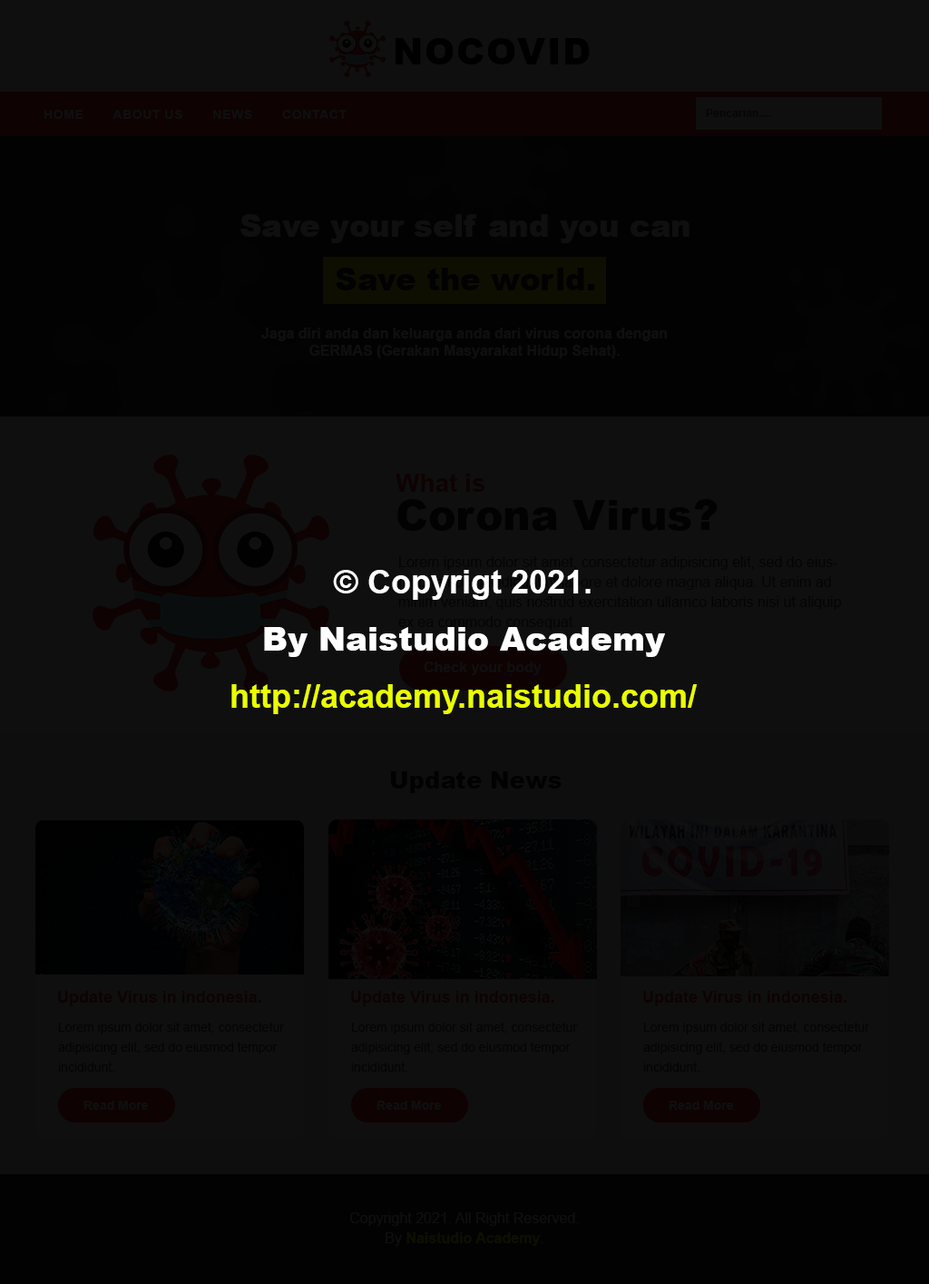
<style>
.page{position:relative;width:929px;height:1284px;background:#0f0f0f}
.page>*{position:absolute;margin:0}
.t1{font:36.3px "Arial-Black";letter-spacing:0.01em;color:#000000;text-transform:uppercase}
.t2{font:12.7px "Arial-BoldMT";letter-spacing:0.01em;color:#0f0f0f;text-transform:uppercase}
.t3{font:10.9px "Arial-BoldMT";letter-spacing:0.01em;color:#050505}
.t4{font:30.8px/53.5px "Arial-Black";color:#ffffff}
.t5{font:30.8px/53.5px "Arial-Black";color:#242424}
.t6{font:14.5px/17.2px "Arial-BoldMT";color:#0f0f0f}
.t7{font:41.7px/38.1px "Arial-Black";color:#020202}
.t8{font:25.4px/38.1px "Arial-BoldMT";color:#020202}
.t9{font:32.7px/57.2px "Arial-BoldMT";color:#eaff00}
.t10{font:32.7px/57.2px "Arial-BoldMT";color:#ffffff}
.t11{font:32.7px/57.2px "Arial-Black";color:#ffffff}
.t12{font:14.5px "Arial-BoldMT";color:#0f0f0f}
.t13{font:23.6px "Arial-Black";color:#020202}
.t14{font:16.3px "Arial-BoldMT";color:#0e0202}
.t15{font:12.7px/20px "ArialMT";color:#040404}
.t16{font:12.7px "Arial-BoldMT";color:#0f0f0f}
.t17{font:14.5px/20px "ArialMT";color:#0e0f00}
.t18{font:14.5px/20px "Arial-BoldMT";color:#0e0f00}
</style>
<div class="page">
<p class="t1" style="left:396px;top:38px;width:194px;height:26px">nocovid</p>
<p class="t2" style="left:44px;top:110px;width:303px;height:9px">HOME        About Us        News        CONTACT</p>
<p class="t3" style="left:706px;top:109px;width:65px;height:8px">Pencarian....</p>
<p class="t4" style="left:240px;top:214px;width:449px;height:76px;text-align:center">Save your self and you can<br><span class="t5">Save the world.</span></p>
<p class="t6" style="left:261px;top:327px;width:407px;height:31px;text-align:center">Jaga diri anda dan keluarga anda dari virus corona dengan<br>GERMAS (Gerakan Masyarakat Hidup Sehat).</p>
<p class="t7" style="left:396px;top:474px;width:322px;height:57px"><span class="t8">What is<br></span>Corona Virus?</p>
<p class="t9" style="left:231px;top:570px;width:466px;height:144px;text-align:center"><span class="t10">© Copyrigt 2021.<br></span><span class="t11">By Naistudio Academy<br></span>http://academy.naistudio.com/</p>
<p class="t12" style="left:424px;top:661px;width:118px;height:14px">Check your body</p>
<p class="t13" style="left:390px;top:771px;width:172px;height:22px">Update News</p>
<p class="t14" style="left:58px;top:991px;width:203px;height:15px">Update Virus in indonesia.</p>
<p class="t14" style="left:351px;top:991px;width:203px;height:15px">Update Virus in indonesia.</p>
<p class="t14" style="left:643px;top:991px;width:203px;height:15px">Update Virus in indonesia.</p>
<p class="t15" style="left:58px;top:1021px;width:227px;height:50px">Lorem ipsum dolor sit amet, consectetur adipisicing elit, sed do eiusmod tempor incididunt.</p>
<p class="t15" style="left:351px;top:1021px;width:227px;height:50px">Lorem ipsum dolor sit amet, consectetur adipisicing elit, sed do eiusmod tempor incididunt.</p>
<p class="t15" style="left:643px;top:1021px;width:227px;height:50px">Lorem ipsum dolor sit amet, consectetur adipisicing elit, sed do eiusmod tempor incididunt.</p>
<p class="t16" style="left:83px;top:1100px;width:66px;height:9px">Read More</p>
<p class="t16" style="left:376px;top:1100px;width:66px;height:9px">Read More</p>
<p class="t16" style="left:669px;top:1100px;width:65px;height:9px">Read More</p>
<p class="t17" style="left:350px;top:1212px;width:229px;height:34px;text-align:center">Copyright 2021. All Right Reserved.<br>By <span class="t18">Naistudio Academy</span>.</p>
</div>
